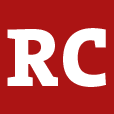
<style>
.page{position:relative;width:114px;height:114px;background:#ac1414}
.page>*{position:absolute;margin:0}
.t1{font:85px "TheSerifExtraBold-Caps";color:#ffffff}
</style>
<div class="page">
<p class="t1" style="left:7px;top:28px;width:99px;height:59px">RC</p>
</div>
